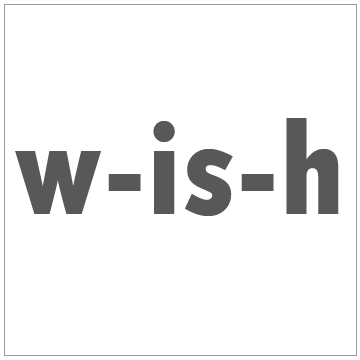
<style>
.page{position:relative;width:360px;height:360px;background:#ffffff}
.page>*{position:absolute;margin:0}
.t1{font:140px "TwCenMT-CondensedExtraBold";color:#575757}
</style>
<div class="page">
<p class="t1" style="left:15px;top:118px;width:324px;height:98px">w-is-h</p>
</div>
